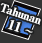
<style>
.page{position:relative;width:42px;height:43px;background:#333333}
.page>*{position:absolute;margin:0}
.t1{font:11px/14px "RyuminPro-ExBold";letter-spacing:-0.08em;color:#ffffff;font-weight:bold}
.t2{font:13px/14px "RyuminPro-ExBold";color:#ffffff;font-weight:bold}
.t3{font:13px/14px "WineArial";color:#ffffff;font-weight:bold}
</style>
<div class="page">
<p class="t1" style="left:0px;top:3px;width:41px;height:30px;text-align:center;rotate:19deg">Tahunan<br><span class="t2">  11 </span><span class="t3">~</span></p>
</div>
